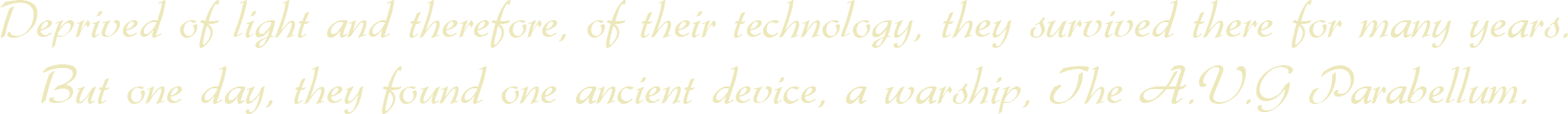
<style>
.page{position:relative;width:1568px;height:114px;background:#ffffff}
.page>*{position:absolute;margin:0}
.t1{font:55.3px "Gabrielle";color:#ede8bb}
</style>
<div class="page">
<p class="t1" style="left:0px;top:0px;width:1568px;height:114px;text-align:center">Deprived of light and therefore, of their technology, they survived there for many years.<br>But one day, they found one ancient device, a warship, The A.V.G Parabellum.</p>
</div>
